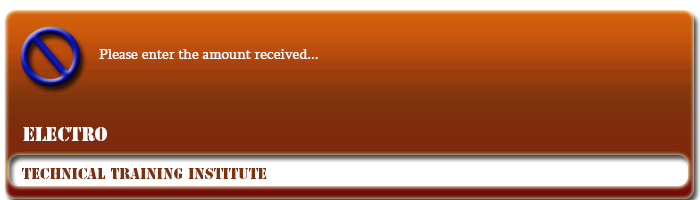
<style>
.page{position:relative;width:700px;height:200px}
.page>*{position:absolute;margin:0}
.t1{font:15px "Sylfaen";color:#ffffff}
.t2{font:18px "StencilStd";color:#ffffff}
.t3{font:14px "StencilStd";color:#7f300d}
</style>
<div class="page">
<p class="t1" style="left:99px;top:49px;width:219px;height:10px">Please enter the amount received...</p>
<p class="t2" style="left:23px;top:127px;width:84px;height:14px">ELECTRO</p>
<p class="t3" style="left:22px;top:168px;width:245px;height:11px">Technical Training Institute</p>
</div>
